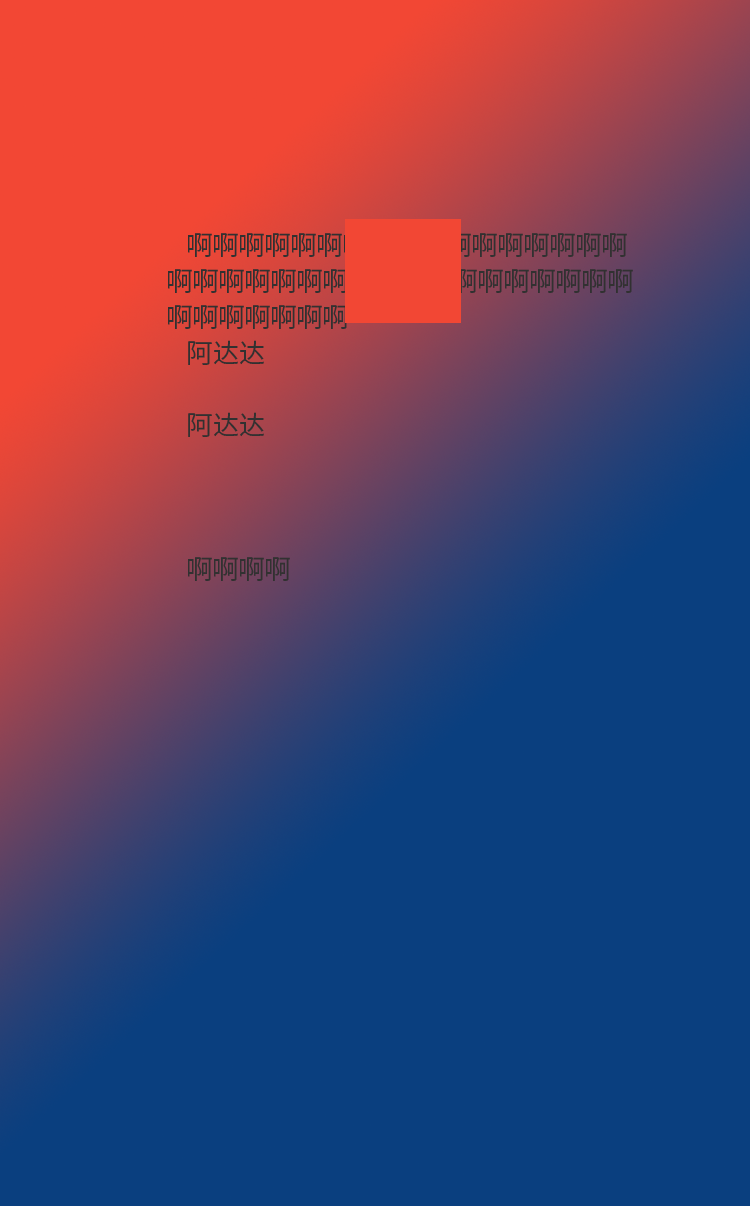
<style>
.page{position:relative;width:750px;height:1206px;background:#0a3f7f}
.page>*{position:absolute;margin:0}
.t1{font:27px/36px "SourceHanSansCN-Regular";letter-spacing:-0.04em;color:#313131}
.t2{font:31px/36px "SourceHanSansCN-Regular";letter-spacing:-0.04em;color:#ff0000}
.t3{font:31px/36px "SourceHanSansCN-Regular";letter-spacing:-0.04em;color:#313131}
</style>
<div class="page">
<p class="t1" style="left:168px;top:233px;width:466px;height:348px">啊啊啊啊啊啊啊啊啊啊啊啊啊啊啊啊啊啊啊啊<span class="t2">啊啊啊啊啊</span><span class="t3">啊啊</span>啊啊啊啊啊啊啊啊啊啊啊啊啊啊啊<br>阿达达<br><br>阿达达<br><br><br><br>啊啊啊啊</p>
<p class="t1" style="left:168px;top:233px;width:465px;height:348px">啊啊啊啊啊啊啊啊啊啊啊啊啊啊啊啊啊啊啊啊啊啊啊啊啊啊啊啊啊啊啊啊啊啊啊啊啊啊啊啊啊啊<br>阿达达<br><br>阿达达<br><br><br><br>啊啊啊啊</p>
</div>
